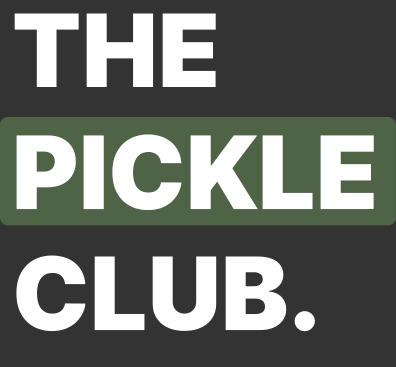
<style>
.page{position:relative;width:396px;height:367px;background:#333333}
.page>*{position:absolute;margin:0}
.t1{font:101.2px "Inter-Black";color:#ffffff}
</style>
<div class="page">
<p class="t1" style="left:14px;top:13px;width:360px;height:319px">THE<br>PICKLE<br>CLUB.</p>
</div>
